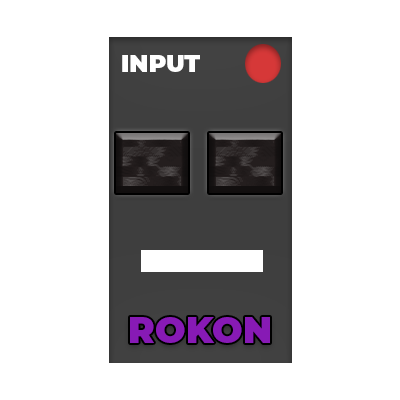
<style>
.page{position:relative;width:400px;height:400px;background:#ffffff}
.page>*{position:absolute;margin:0}
.t1{font:24px "Montserrat-Black";color:#ffffff;text-transform:uppercase}
.t2{font:36px "Montserrat-Black";color:#871ab5;text-transform:uppercase}
</style>
<div class="page">
<p class="t1" style="left:122px;top:55px;width:78px;height:17px">input</p>
<p class="t2" style="left:130px;top:317px;width:140px;height:26px">rokon</p>
</div>
